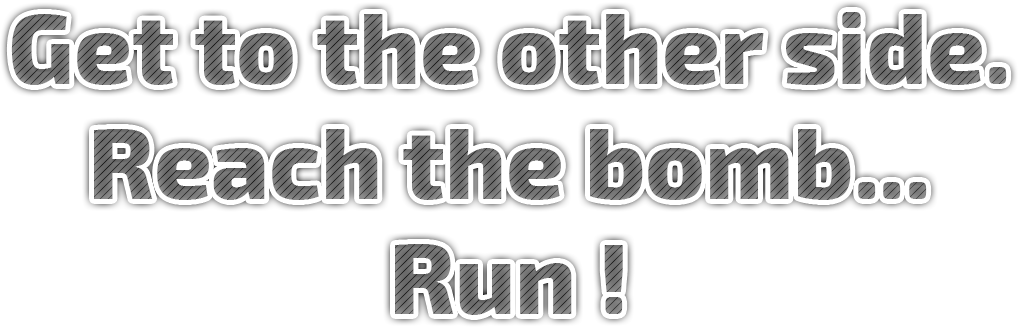
<style>
.page{position:relative;width:1018px;height:327px;background:#ffffff}
.page>*{position:absolute;margin:0}
.t1{font:100px/110px "Exo2-ExtraBold";color:#717171}
</style>
<div class="page">
<p class="t1" style="left:11px;top:12px;width:996px;height:303px;text-align:center">Get to the other side.<br>Reach the bomb...<br>Run !</p>
</div>
